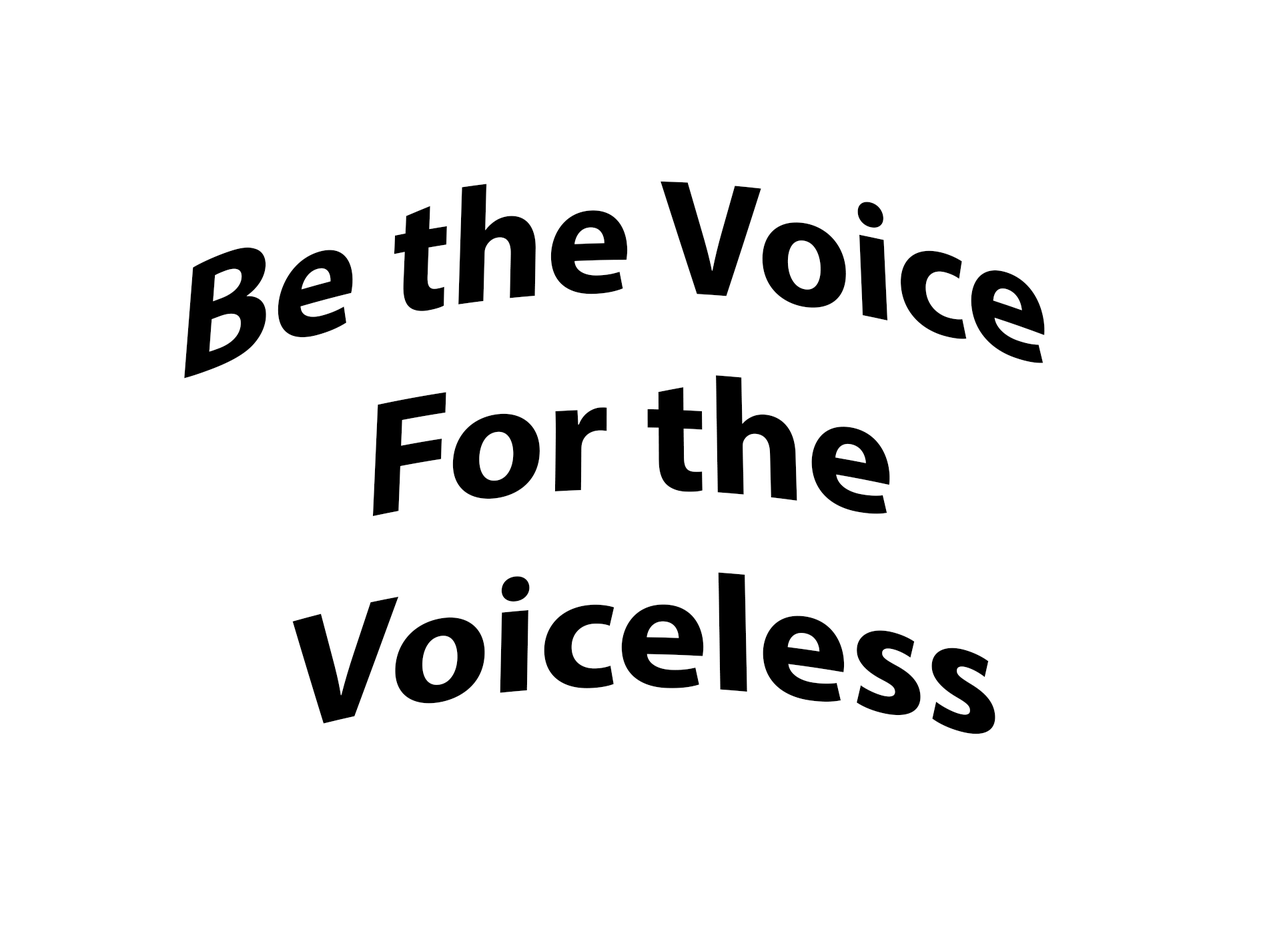
<style>
.page{position:relative;width:1261px;height:946px;background:#ffffff}
.page>*{position:absolute;margin:0}
.t1{font:166.8px "MyriadPro-Bold";color:#000000}
</style>
<div class="page">
<p class="t1" style="left:184px;top:181px;width:861px;height:553px;text-align:center">Be the Voice <br>For the<br> Voiceless</p>
</div>
